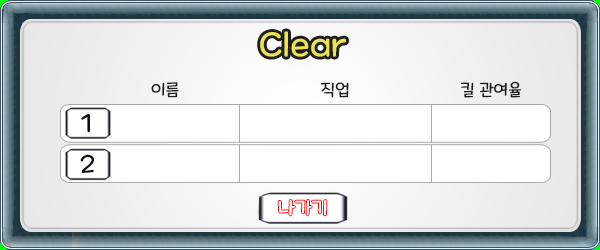
<style>
.page{position:relative;width:600px;height:250px;background:#ffffff}
.page>*{position:absolute;margin:0}
.t1{font:33.3px "MaplestoryLight";color:#ede453}
.t2{font:16.7px "MaplestoryLight";color:#1c1c1c}
.t3{font:12px "MaplestoryLight";color:#1c1c1c}
.t4{font:25px "MaplestoryLight";color:#0e0e0e}
</style>
<div class="page">
<p class="t1" style="left:260px;top:31px;width:86px;height:26px">Clear</p>
<p class="t2" style="left:151px;top:82px;width:28px;height:16px">이름</p>
<p class="t3" style="left:320px;top:82px;width:29px;height:16px">직업</p>
<p class="t3" style="left:461px;top:81px;width:61px;height:17px">킬 관여율</p>
<p class="t4" style="left:81px;top:114px;width:9px;height:19px">1</p>
<p class="t4" style="left:80px;top:154px;width:14px;height:19px">2</p>
</div>
